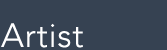
<style>
.page{position:relative;width:167px;height:50px;background:#364252}
.page>*{position:absolute;margin:0}
.t1{font:33.3px "AvenirLTStd-Light";letter-spacing:0.025em;color:#ffffff}
</style>
<div class="page">
<p class="t1" style="left:1px;top:23px;width:82px;height:25px">Artist</p>
</div>
